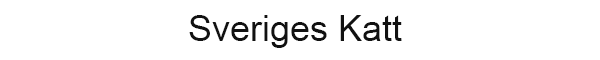
<style>
.page{position:relative;width:600px;height:60px;background:#ffffff}
.page>*{position:absolute;margin:0}
.t1{font:36.4px "ArialMT";color:#111111}
</style>
<div class="page">
<p class="t1" style="left:189px;top:15px;width:213px;height:33px">Sveriges Katt</p>
</div>
